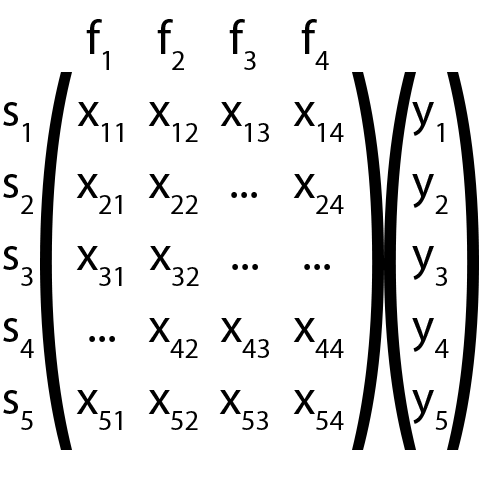
<style>
.page{position:relative;width:480px;height:480px;background:#ffffff}
.page>*{position:absolute;margin:0}
.t1{font:48px "MyriadPro-Regular";color:#000000}
.t2{font:48px "MyriadPro-Regular";color:#000000;font-variant:small-caps}
</style>
<div class="page">
<p class="t1" style="left:86px;top:19px;width:23px;height:51px">f<span class="t2">1</span></p>
<p class="t1" style="left:157px;top:19px;width:27px;height:51px">f2</p>
<p class="t1" style="left:229px;top:19px;width:27px;height:51px">f<span class="t2">3</span></p>
<p class="t1" style="left:301px;top:19px;width:28px;height:51px">f<span class="t2">4</span></p>
<p class="t1" style="left:3px;top:102px;width:26px;height:40px">s<span class="t2">1</span></p>
<p class="t2" style="left:77px;top:102px;width:46px;height:40px"><span class="t1">x</span>11</p>
<p class="t2" style="left:148px;top:102px;width:50px;height:40px"><span class="t1">x</span>12</p>
<p class="t2" style="left:220px;top:102px;width:49px;height:40px"><span class="t1">x</span>13</p>
<p class="t2" style="left:293px;top:102px;width:51px;height:40px"><span class="t1">x</span>14</p>
<p class="t1" style="left:412px;top:102px;width:32px;height:40px">y<span class="t2">1</span></p>
<p class="t1" style="left:3px;top:174px;width:30px;height:40px">s<span class="t2">2</span></p>
<p class="t2" style="left:76px;top:174px;width:46px;height:40px"><span class="t1">x</span>21</p>
<p class="t2" style="left:148px;top:174px;width:50px;height:40px"><span class="t1">x</span>22</p>
<p class="t2" style="left:293px;top:174px;width:51px;height:40px"><span class="t1">x</span>24</p>
<p class="t1" style="left:412px;top:174px;width:36px;height:40px">y<span class="t2">2</span></p>
<p class="t1" style="left:231px;top:192px;width:26px;height:6px">...</p>
<p class="t1" style="left:3px;top:246px;width:30px;height:40px">s<span class="t2">3</span></p>
<p class="t2" style="left:76px;top:246px;width:46px;height:40px"><span class="t1">x</span>31</p>
<p class="t2" style="left:149px;top:246px;width:50px;height:40px"><span class="t1">x</span>32</p>
<p class="t1" style="left:412px;top:246px;width:35px;height:40px">y<span class="t2">3</span></p>
<p class="t1" style="left:232px;top:264px;width:26px;height:6px">...</p>
<p class="t1" style="left:304px;top:264px;width:26px;height:6px">...</p>
<p class="t1" style="left:3px;top:318px;width:31px;height:40px">s<span class="t2">4</span></p>
<p class="t2" style="left:148px;top:318px;width:50px;height:40px"><span class="t1">x</span>42</p>
<p class="t2" style="left:220px;top:318px;width:49px;height:40px"><span class="t1">x</span>43</p>
<p class="t2" style="left:293px;top:318px;width:51px;height:40px"><span class="t1">x</span>44</p>
<p class="t1" style="left:412px;top:318px;width:37px;height:40px">y<span class="t2">4</span></p>
<p class="t1" style="left:89px;top:336px;width:26px;height:6px">...</p>
<p class="t1" style="left:3px;top:390px;width:30px;height:40px">s5</p>
<p class="t2" style="left:76px;top:390px;width:46px;height:40px"><span class="t1">x</span>51</p>
<p class="t2" style="left:148px;top:390px;width:50px;height:40px"><span class="t1">x</span>52</p>
<p class="t2" style="left:219px;top:390px;width:49px;height:40px"><span class="t1">x</span>53</p>
<p class="t2" style="left:293px;top:390px;width:51px;height:40px"><span class="t1">x</span>54</p>
<p class="t1" style="left:412px;top:390px;width:35px;height:40px">y<span class="t2">5</span></p>
</div>
